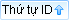
<style>
.page{position:relative;width:69px;height:20px}
.page>*{position:absolute;margin:0}
.t1{font:12px "ArialMT";color:#000000}
</style>
<div class="page">
<p class="t1" style="left:2px;top:4px;width:50px;height:12px">Thứ tự ID</p>
</div>
